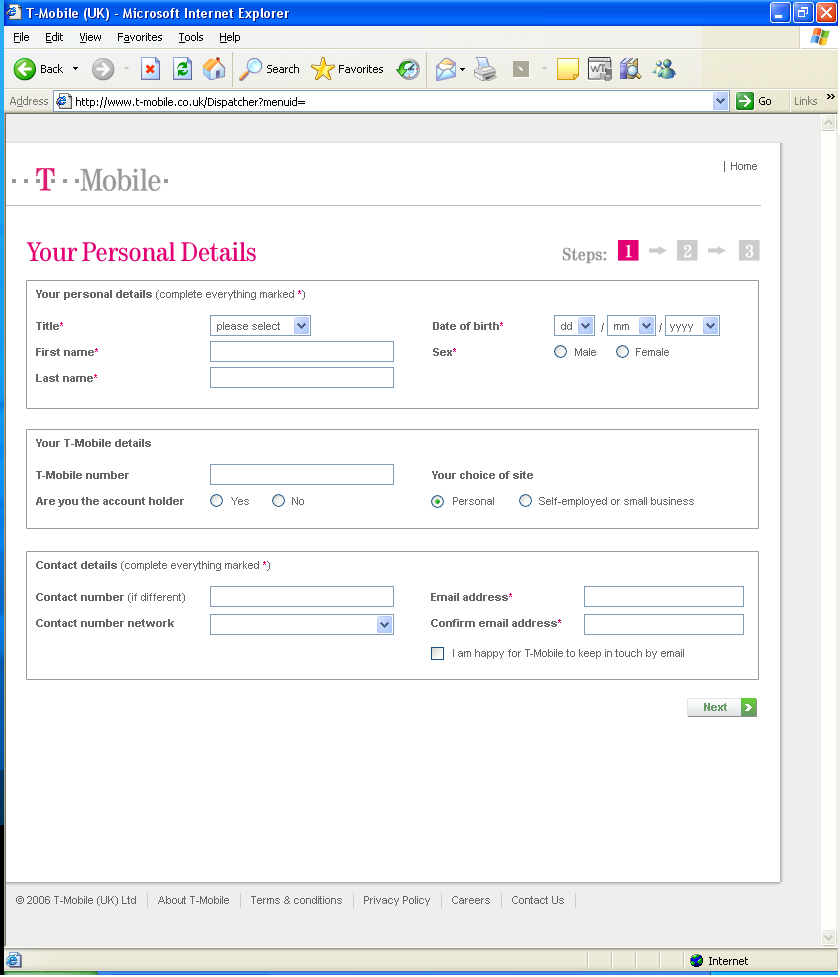
<style>
.page{position:relative;width:840px;height:977px;background:#ffffff}
.page>*{position:absolute;margin:0}
.t1{font:28px "Tele-Antiqua";color:#e20074}
.t2{font:18px "Tele-Antiqua";color:#ffffff;font-weight:bold}
.t3{font:18px "Tele-Antiqua";color:#999999;font-weight:bold}
.t4{font:11px "ArialMT";color:#666666}
.t5{font:11px "Arial-BoldMT";color:#666666}
.t6{font:11px "ArialMT";color:#e20074}
.t7{font:11px/16px "Arial-BoldMT";color:#666666}
.t8{font:11px/16px "Arial-BoldMT";color:#e20074}
.t9{font:11px/26px "Arial-BoldMT";color:#666666}
.t10{font:11px/26px "Arial-BoldMT";color:#e20074}
.t11{font:11px/16px "ArialMT";color:#666666}
.t12{font:11px "Arial-BoldMT";color:#669a65}
</style>
<div class="page">
<p class="t1" style="left:26px;top:242px;width:230px;height:20px">Your Personal Details</p>
<p class="t2" style="left:625px;top:244px;width:7px;height:14px">1</p>
<p class="t2" style="left:683px;top:244px;width:9px;height:14px">2</p>
<p class="t2" style="left:745px;top:244px;width:9px;height:14px">3</p>
<p class="t3" style="left:562px;top:247px;width:45px;height:17px">Steps:</p>
<p class="t4" style="left:36px;top:290px;width:269px;height:92px"><span class="t5">Your personal details </span>(complete everything marked<span class="t6"> *</span>)<br><span class="t7"><br>Title</span><span class="t8">*<br></span><span class="t9">First name</span><span class="t10">*<br></span><span class="t9">Last name</span><span class="t10">*</span></p>
<p class="t4" style="left:217px;top:322px;width:63px;height:10px">please select</p>
<p class="t9" style="left:433px;top:322px;width:70px;height:34px">Date of birth<span class="t10">*<br></span>Sex<span class="t10">*</span></p>
<p class="t4" style="left:561px;top:322px;width:11px;height:8px">dd</p>
<p class="t4" style="left:614px;top:324px;width:15px;height:6px">mm</p>
<p class="t4" style="left:670px;top:324px;width:23px;height:8px">yyyy</p>
<p class="t4" style="left:575px;top:348px;width:21px;height:8px">Male</p>
<p class="t4" style="left:636px;top:348px;width:33px;height:8px">Female</p>
<p class="t9" style="left:36px;top:439px;width:148px;height:68px"><span class="t5">Your T-Mobile details<br></span><span class="t7"><br>T-Mobile number<br></span>Are you the account holder</p>
<p class="t5" style="left:432px;top:471px;width:101px;height:8px">Your choice of site</p>
<p class="t4" style="left:231px;top:497px;width:18px;height:8px">Yes</p>
<p class="t4" style="left:292px;top:497px;width:12px;height:8px">No</p>
<p class="t4" style="left:453px;top:497px;width:41px;height:8px">Personal</p>
<p class="t4" style="left:539px;top:497px;width:155px;height:10px">Self-employed or small business</p>
<p class="t4" style="left:36px;top:561px;width:234px;height:66px"><span class="t5">Contact details </span>(complete everything marked <span class="t6">*</span>)<br><span class="t7"><br>Contact number</span><span class="t11"> (if different)<br></span><span class="t9">Contact number network</span></p>
<p class="t9" style="left:431px;top:593px;width:130px;height:34px"><span class="t7">Email address</span><span class="t8">*<br></span>Confirm email address<span class="t10">*</span></p>
<p class="t4" style="left:453px;top:649px;width:231px;height:10px">I am happy for T-Mobile to keep in touch by email</p>
<p class="t12" style="left:704px;top:703px;width:23px;height:8px">Next</p>
</div>
